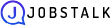
<style>
.page{position:relative;width:110px;height:26px;background:#ffffff}
.page>*{position:absolute;margin:0}
.t1{font:15px "Dosis-SemiBold";letter-spacing:0.18em;color:#000000;text-transform:uppercase}
</style>
<div class="page">
<p class="t1" style="left:27px;top:7px;width:83px;height:11px">JOBSTALK</p>
</div>
